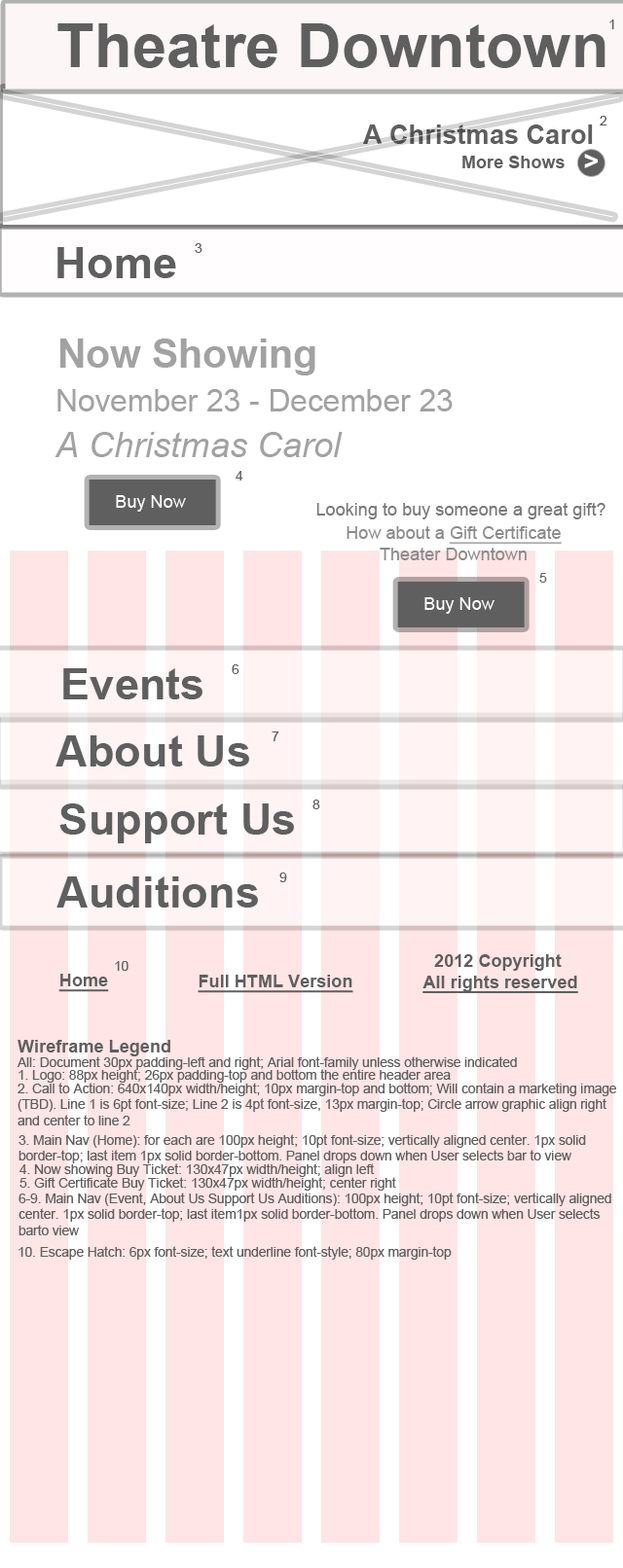
<style>
.page{position:relative;width:623px;height:1568px;background:#ffffff}
.page>*{position:absolute;margin:0}
.t1{font:61.7px "Arial-BoldMT";color:#5f5f5f}
.t2{font:13.2px "ArialMT";color:#5f5f5f}
.t3{font:26.4px "Arial-BoldMT";color:#5f5f5f}
.t4{font:17.6px "Arial-BoldMT";color:#5f5f5f}
.t5{font:26.4px "Arial-BoldMT";color:#ffffff}
.t6{font:44px "Arial-BoldMT";color:#5f5f5f}
.t7{font:39.6px "Arial-BoldMT";color:#a2a2a2}
.t8{font:30.8px "ArialMT";color:#a2a2a2}
.t9{font:35.2px "Arial-ItalicMT";color:#a2a2a2}
.t10{font:17.6px "ArialMT";color:#ffffff}
.t11{font:17.6px "ArialMT";color:#7a7a7a}
.t12{font:17.6px "ArialMT";color:#8c8b8b;text-decoration:underline}
.t13{font:17.6px "ArialMT";color:#8c8b8b}
.t14{font:17.6px "Arial-BoldMT";color:#5f5f5f;text-decoration:underline}
</style>
<div class="page">
<p class="t1" style="left:57px;top:23px;width:548px;height:45px">Theatre Downtown</p>
<p class="t2" style="left:609px;top:19px;width:5px;height:10px">1</p>
<p class="t3" style="left:363px;top:125px;width:229px;height:19px">A Christmas Carol</p>
<p class="t2" style="left:599px;top:116px;width:8px;height:9px">2</p>
<p class="t4" style="left:462px;top:156px;width:102px;height:12px">More Shows</p>
<p class="t5" style="left:584px;top:154px;width:13px;height:14px">&gt;</p>
<p class="t2" style="left:195px;top:243px;width:7px;height:10px">3</p>
<p class="t6" style="left:57px;top:247px;width:119px;height:31px">Home</p>
<p class="t7" style="left:60px;top:339px;width:255px;height:36px">Now Showing</p>
<p class="t8" style="left:57px;top:389px;width:395px;height:22px">November 23 - December 23</p>
<p class="t9" style="left:54px;top:432px;width:288px;height:25px">A Christmas Carol</p>
<p class="t2" style="left:235px;top:471px;width:8px;height:10px">4</p>
<p class="t10" style="left:116px;top:495px;width:70px;height:17px">Buy Now</p>
<p class="t11" style="left:316px;top:503px;width:289px;height:16px">Looking to buy someone a great gift?</p>
<p class="t12" style="left:346px;top:526px;width:215px;height:34px;text-align:center"><span class="t13">How about a </span>Gift Certificate<br><span class="t13">Theater Downtown</span></p>
<p class="t2" style="left:539px;top:573px;width:8px;height:10px">5</p>
<p class="t10" style="left:424px;top:597px;width:70px;height:17px">Buy Now</p>
<p class="t2" style="left:232px;top:664px;width:7px;height:10px">6</p>
<p class="t6" style="left:63px;top:668px;width:139px;height:31px">Events</p>
<p class="t6" style="left:55px;top:735px;width:194px;height:31px">About Us</p>
<p class="t2" style="left:271px;top:731px;width:8px;height:10px">7</p>
<p class="t6" style="left:59px;top:803px;width:235px;height:40px">Support Us</p>
<p class="t2" style="left:312px;top:800px;width:8px;height:9px">8</p>
<p class="t6" style="left:56px;top:876px;width:202px;height:32px">Auditions</p>
<p class="t2" style="left:279px;top:873px;width:8px;height:9px">9</p>
<p class="t2" style="left:115px;top:961px;width:13px;height:10px">10</p>
<p class="t14" style="left:422px;top:954px;width:156px;height:39px;text-align:center"><span class="t4">2012 Copyright <br></span>All rights reserved</p>
<p class="t14" style="left:58px;top:974px;width:51px;height:18px">Home</p>
<p class="t14" style="left:197px;top:975px;width:156px;height:18px">Full HTML Version</p>
<p class="t4" style="left:18px;top:1040px;width:152px;height:16px">Wireframe Legend</p>
<p class="t2" style="left:18px;top:1056px;width:499px;height:14px">All: Document 30px padding-left and right; Arial font-family unless otherwise indicated</p>
<p class="t2" style="left:18px;top:1069px;width:432px;height:14px">1. Logo: 88px height; 26px padding-top and bottom the entire header area</p>
<p class="t2" style="left:18px;top:1083px;width:598px;height:42px">2. Call to Action: 640x140px width/height; 10px margin-top and bottom; Will contain a marketing image <br>(TBD). Line 1 is 6pt font-size; Line 2 is 4pt font-size, 13px margin-top; Circle arrow graphic align right <br>and center to line 2</p>
<p class="t2" style="left:18px;top:1134px;width:568px;height:29px">3. Main Nav (Home): for each are 100px height; 10pt font-size; vertically aligned center. 1px solid <br>border-top; last item 1px solid border-bottom. Panel drops down when User selects bar to view</p>
<p class="t2" style="left:19px;top:1163px;width:355px;height:14px">4. Now showing Buy Ticket: 130x47px width/height; align left</p>
<p class="t2" style="left:19px;top:1177px;width:377px;height:14px">5. Gift Certificate Buy Ticket: 130x47px width/height; center right</p>
<p class="t2" style="left:18px;top:1193px;width:593px;height:42px">6-9. Main Nav (Event, About Us Support Us Auditions): 100px height; 10pt font-size; vertically aligned <br>center. 1px solid border-top; last item1px solid border-bottom. Panel drops down when User selects <br>barto view</p>
<p class="t2" style="left:18px;top:1246px;width:433px;height:14px">10. Escape Hatch: 6px font-size; text underline font-style; 80px margin-top</p>
</div>
